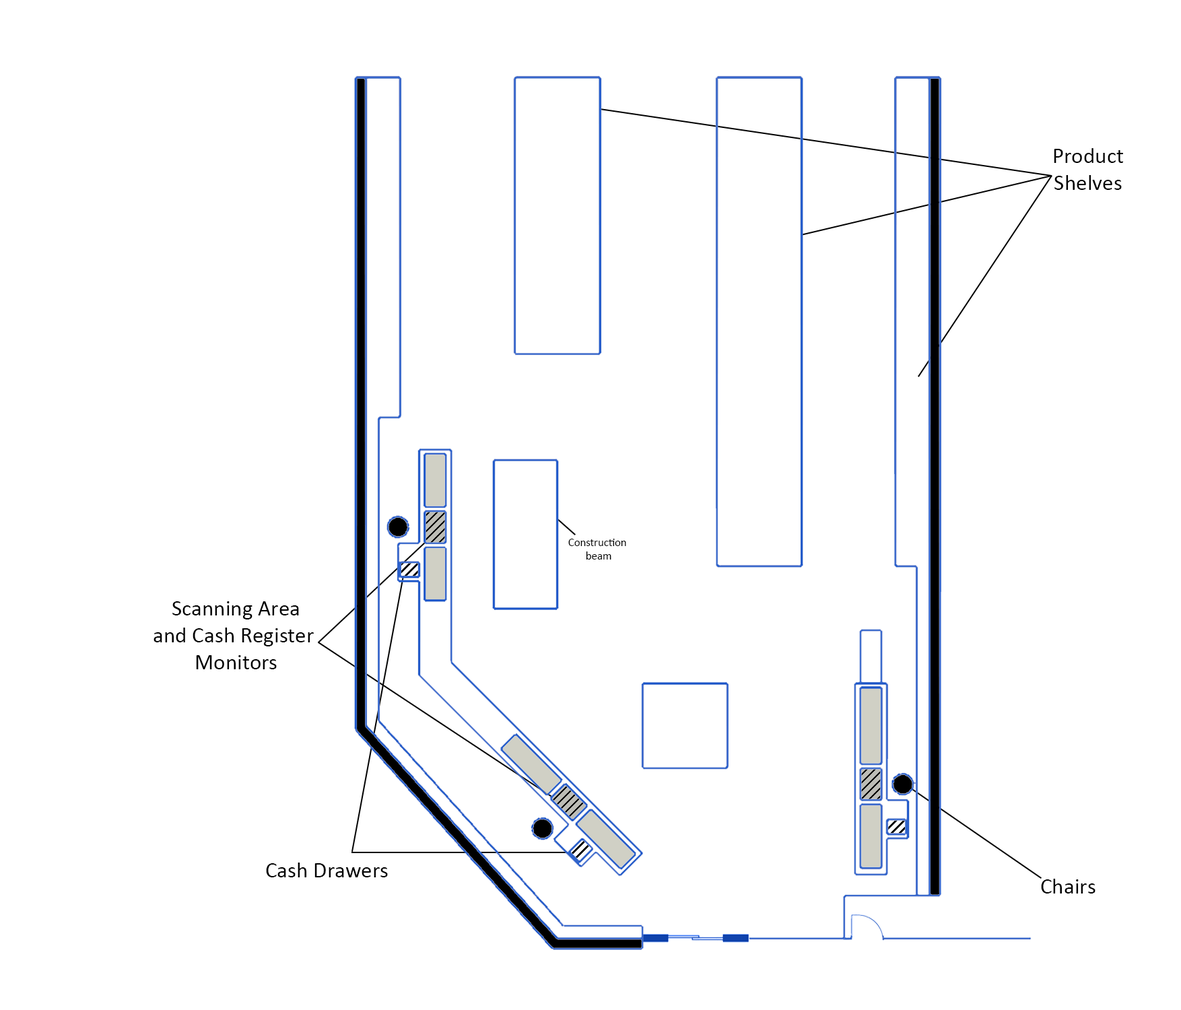
<style>
.page{position:relative;width:1181px;height:1010px;background:#ffffff}
.page>*{position:absolute;margin:0}
.t1{font:22.4px "Calibri";color:#000000}
.t2{font:11.2px "Calibri";color:#000000}
</style>
<div class="page">
<p class="t1" style="left:1054px;top:148px;width:69px;height:42px;text-align:center">Product<br>Shelves</p>
<p class="t2" style="left:568px;top:539px;width:58px;height:20px;text-align:center">Construction<br> beam</p>
<p class="t1" style="left:153px;top:601px;width:161px;height:68px;text-align:center">Scanning Area<br>and Cash Register <br>Monitors</p>
<p class="t1" style="left:266px;top:862px;width:122px;height:15px">Cash Drawers</p>
<p class="t1" style="left:1041px;top:879px;width:54px;height:14px">Chairs</p>
</div>
